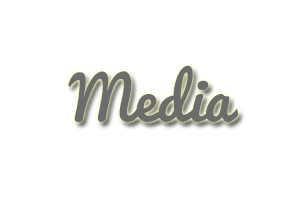
<style>
.page{position:relative;width:300px;height:200px;background:#ffffff}
.page>*{position:absolute;margin:0}
.t1{font:60px "Pacifico-Regular";color:#6c6c6c}
</style>
<div class="page">
<p class="t1" style="left:68px;top:65px;width:171px;height:58px">Media</p>
</div>
